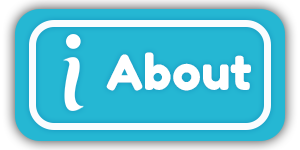
<style>
.page{position:relative;width:300px;height:150px;background:#25b7d3}
.page>*{position:absolute;margin:0}
.t1{font:48.6px "ForkdokaOne-Regular";color:#ffffff}
</style>
<div class="page">
<p class="t1" style="left:106px;top:52px;width:145px;height:39px">About</p>
</div>
